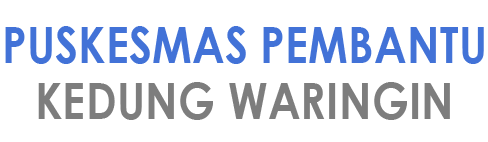
<style>
.page{position:relative;width:488px;height:142px;background:#ffffff}
.page>*{position:absolute;margin:0}
.t1{font:49.8px/56px "CenturyGothic-Bold";color:#4272d7;scale:0.89 1}
.t2{font:49.8px/56px "CenturyGothic-Bold";color:#7d7d7d;scale:0.89 1}
</style>
<div class="page">
<p class="t1" style="left:5px;top:26px;width:479px;height:94px;text-align:center">PUSKESMAS PEMBANTU<br><span class="t2">KEDUNG WARINGIN</span></p>
</div>
